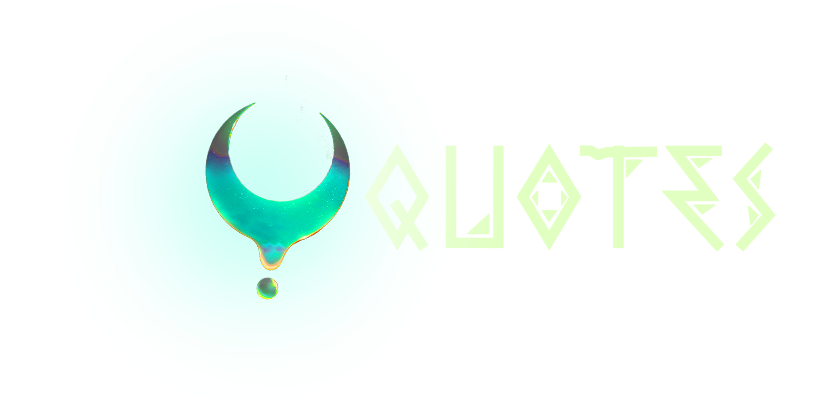
<style>
.page{position:relative;width:832px;height:404px;background:#ffffff}
.page>*{position:absolute;margin:0}
.t1{font:207.2px "AfricaVibes";color:#e0ffc0;font-weight:bold}
</style>
<div class="page">
<p class="t1" style="left:364px;top:142px;width:412px;height:110px">Quotes</p>
</div>
